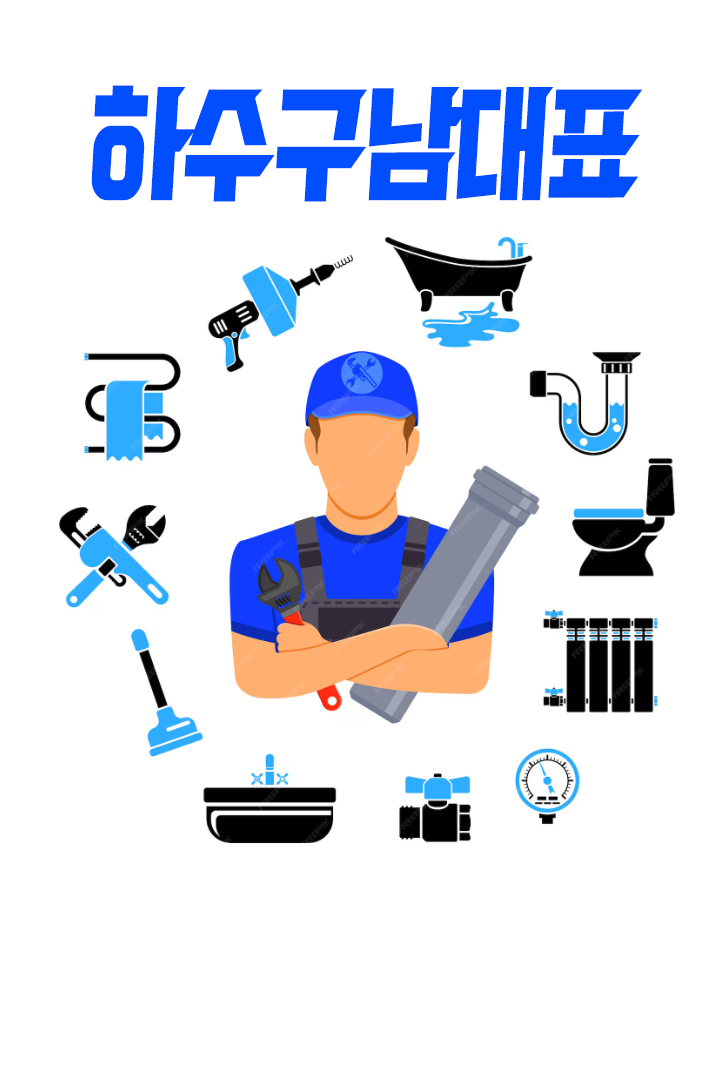
<style>
.page{position:relative;width:726px;height:1080px;background:#ffffff}
.page>*{position:absolute;margin:0}
.t1{font:150.1px "TypoStormB";letter-spacing:-0.075em;color:#004eff;scale:0.7 1}
</style>
<div class="page">
<p class="t1" style="left:91px;top:85px;width:552px;height:117px">하수구남대표</p>
</div>
